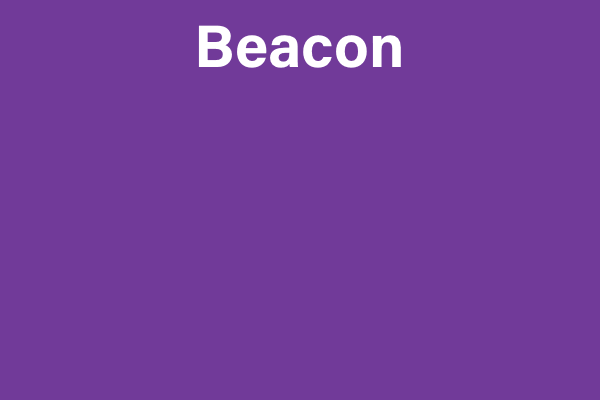
<style>
.page{position:relative;width:600px;height:400px;background:#713a99}
.page>*{position:absolute;margin:0}
.t1{font:60px "AcuminPro-Bold";color:#ffffff}
</style>
<div class="page">
<p class="t1" style="left:198px;top:25px;width:203px;height:43px">Beacon</p>
</div>
